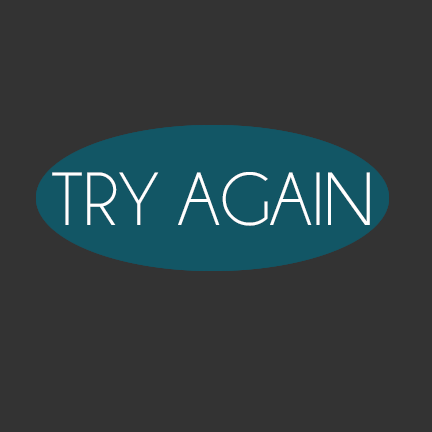
<style>
.page{position:relative;width:432px;height:432px;background:#333333}
.page>*{position:absolute;margin:0}
.t1{font:76px "Champagne&Limousines";color:#ffffff}
</style>
<div class="page">
<p class="t1" style="left:52px;top:172px;width:318px;height:54px">TRY AGAIN</p>
</div>
